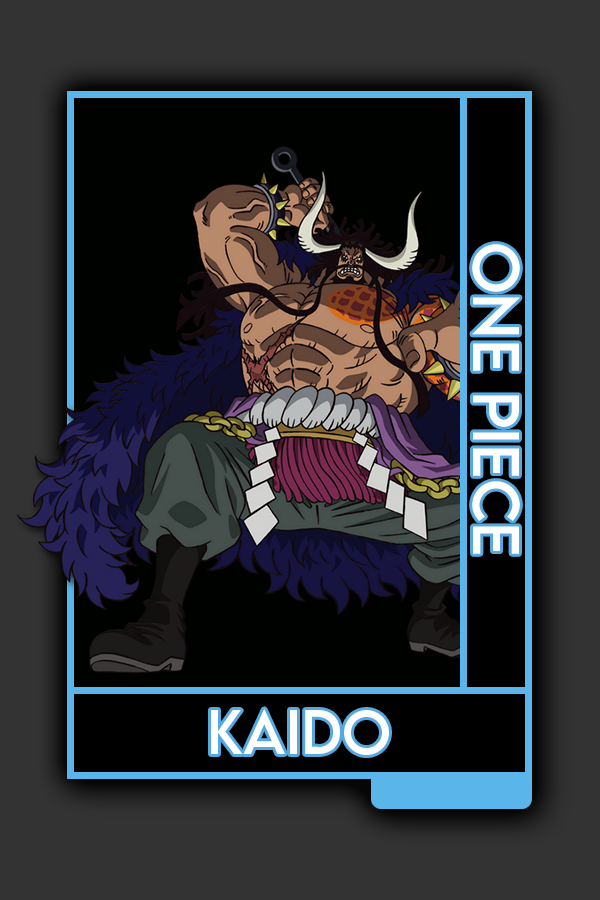
<style>
.page{position:relative;width:600px;height:900px;background:#333333}
.page>*{position:absolute;margin:0}
.t1{font:58.4px "LEMONMILK-Regular";color:#ffffff}
.t2{font:55.4px "LEMONMILK-Regular";color:#ffffff}
</style>
<div class="page">
<p class="t1" style="left:472px;top:244px;width:48px;height:310px;rotate:90deg">One Piece</p>
<p class="t2" style="left:211px;top:709px;width:178px;height:46px">Kaido</p>
</div>
